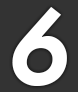
<style>
.page{position:relative;width:78px;height:92px;background:#333333}
.page>*{position:absolute;margin:0}
.t1{font:109.6px "ProductSans-BoldItalic";color:#ffffff}
</style>
<div class="page">
<p class="t1" style="left:12px;top:7px;width:55px;height:79px">6</p>
</div>
